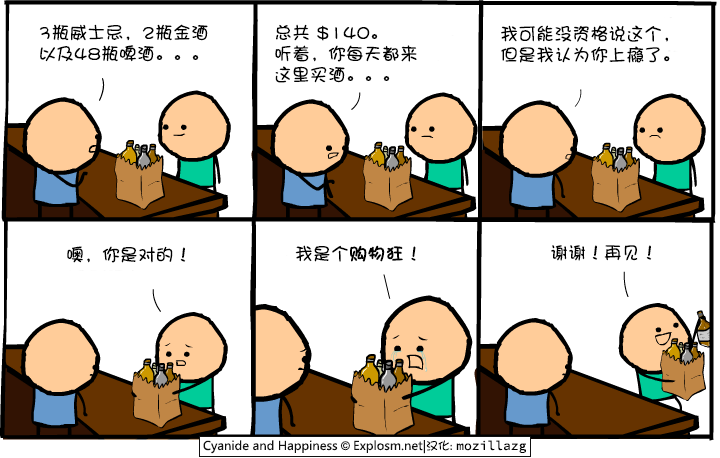
<style>
.page{position:relative;width:720px;height:458px;background:#ffffff}
.page>*{position:absolute;margin:0}
.t1{font:18px/21px "DFPShaoNvW5";color:#000000}
.t2{font:18px "DFPShaoNvW5";color:#000000}
.t3{font:18px "DFPShaoNvW5";color:#000000;font-weight:bold}
</style>
<div class="page">
<p class="t1" style="left:39px;top:24px;width:169px;height:38px">3瓶威士忌，2瓶金酒<br>以及48瓶啤酒。。。</p>
<p class="t1" style="left:275px;top:24px;width:142px;height:59px">总共 $140。<br>听着，你每天都来<br>这里买酒。。。</p>
<p class="t1" style="left:501px;top:25px;width:169px;height:38px">我可能没资格说这个，<br>但是我认为你上瘾了。</p>
<p class="t2" style="left:67px;top:246px;width:119px;height:17px">噢，你是对的！</p>
<p class="t2" style="left:295px;top:245px;width:121px;height:17px">我是个<span class="t3">购物狂</span>！</p>
<p class="t2" style="left:551px;top:245px;width:101px;height:16px">谢谢！再见！</p>
</div>
